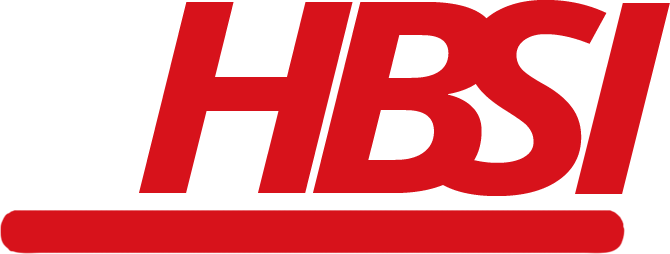
<style>
.page{position:relative;width:670px;height:254px;background:#d7121b}
.page>*{position:absolute;margin:0}
.t1{font:266.7px "OpenSans-BoldItalic";letter-spacing:-0.075em;color:#d7121b;scale:1.18 1}
</style>
<div class="page">
<p class="t1" style="left:139px;top:2px;width:214px;height:191px">H</p>
<p class="t1" style="left:313px;top:2px;width:184px;height:191px">B</p>
<p class="t1" style="left:442px;top:0px;width:165px;height:196px">S</p>
<p class="t1" style="left:575px;top:3px;width:95px;height:191px">I</p>
</div>
